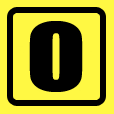
<style>
.page{position:relative;width:114px;height:114px;background:#fff843}
.page>*{position:absolute;margin:0}
.t1{font:87px "Impact";color:#000000;scale:1.27 1}
</style>
<div class="page">
<p class="t1" style="left:29px;top:21px;width:54px;height:71px">O</p>
</div>
